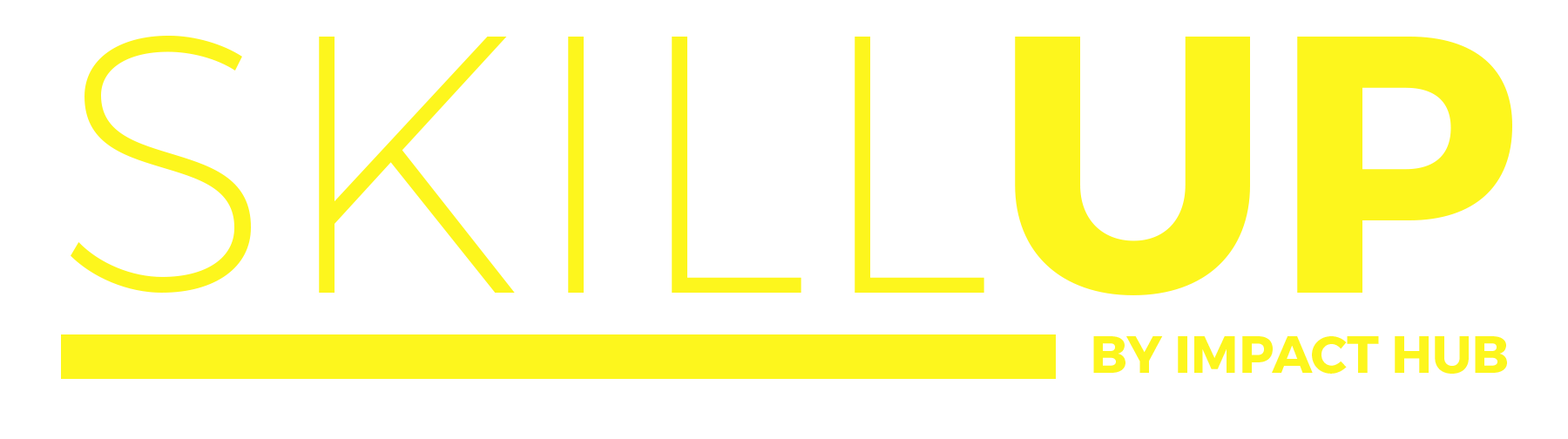
<style>
.page{position:relative;width:1568px;height:439px;background:#ffffff}
.page>*{position:absolute;margin:0}
.t1{font:365.9px "Montserrat-UltraLight";color:#fdf61d}
.t2{font:365.9px "Montserrat-Bold";color:#fdf61d}
.t3{font:52.3px "Montserrat-Bold";color:#fdf61d}
</style>
<div class="page">
<p class="t1" style="left:71px;top:36px;width:1441px;height:259px">SKILL<span class="t2">UP</span></p>
<p class="t3" style="left:1093px;top:336px;width:414px;height:38px">BY IMPACT HUB</p>
</div>
